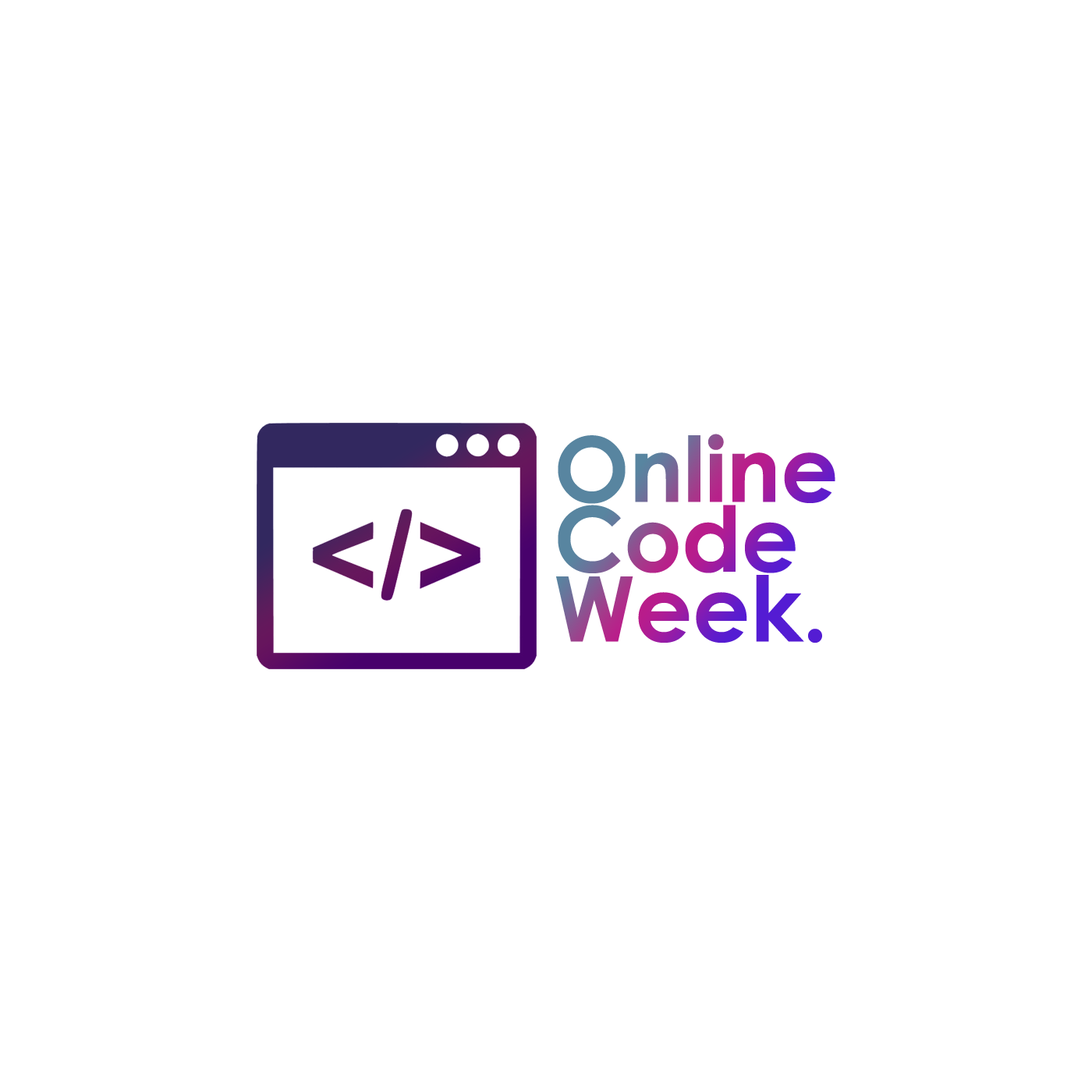
<style>
.page{position:relative;width:1092px;height:1092px;background:#ffffff}
.page>*{position:absolute;margin:0}
.t1{font:90.3px/69.8px "CenturyGothic-Bold"}
</style>
<div class="page">
<p class="t1" style="left:556px;top:434px;width:279px;height:209px">Online<br>Code<br>Week.</p>
</div>
